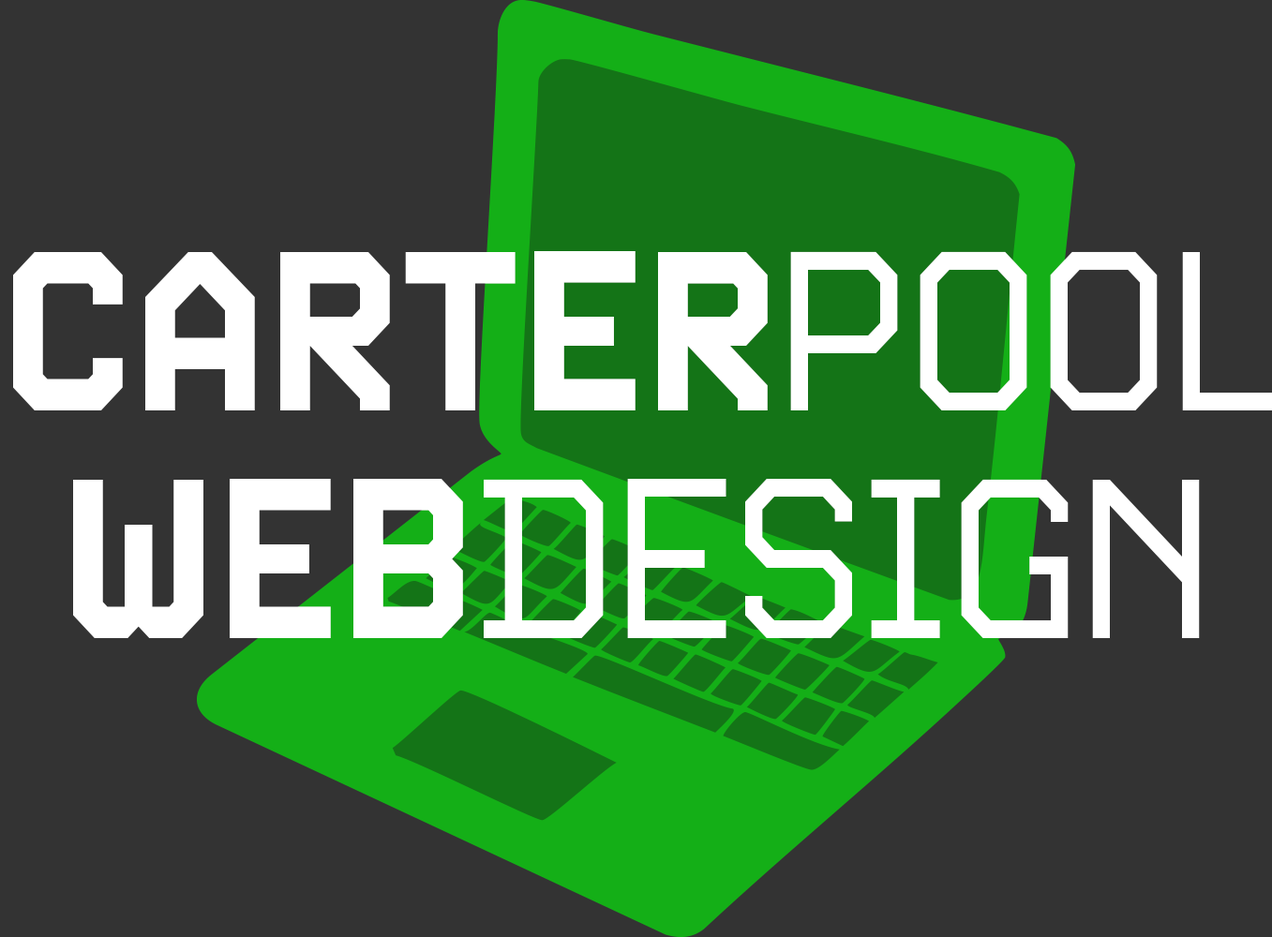
<style>
.page{position:relative;width:1272px;height:937px;background:#333333}
.page>*{position:absolute;margin:0}
.t1{font:227.5px/227.5px "Video-Bold";color:#ffffff;scale:0.94 1}
.t2{font:227.5px/227.5px "Video-Light";color:#ffffff;scale:0.94 1}
</style>
<div class="page">
<p class="t1" style="left:13px;top:251px;width:1260px;height:387px;text-align:center">CARTER<span class="t2">POOL<br></span>WEB<span class="t2">DESIGN</span></p>
</div>
